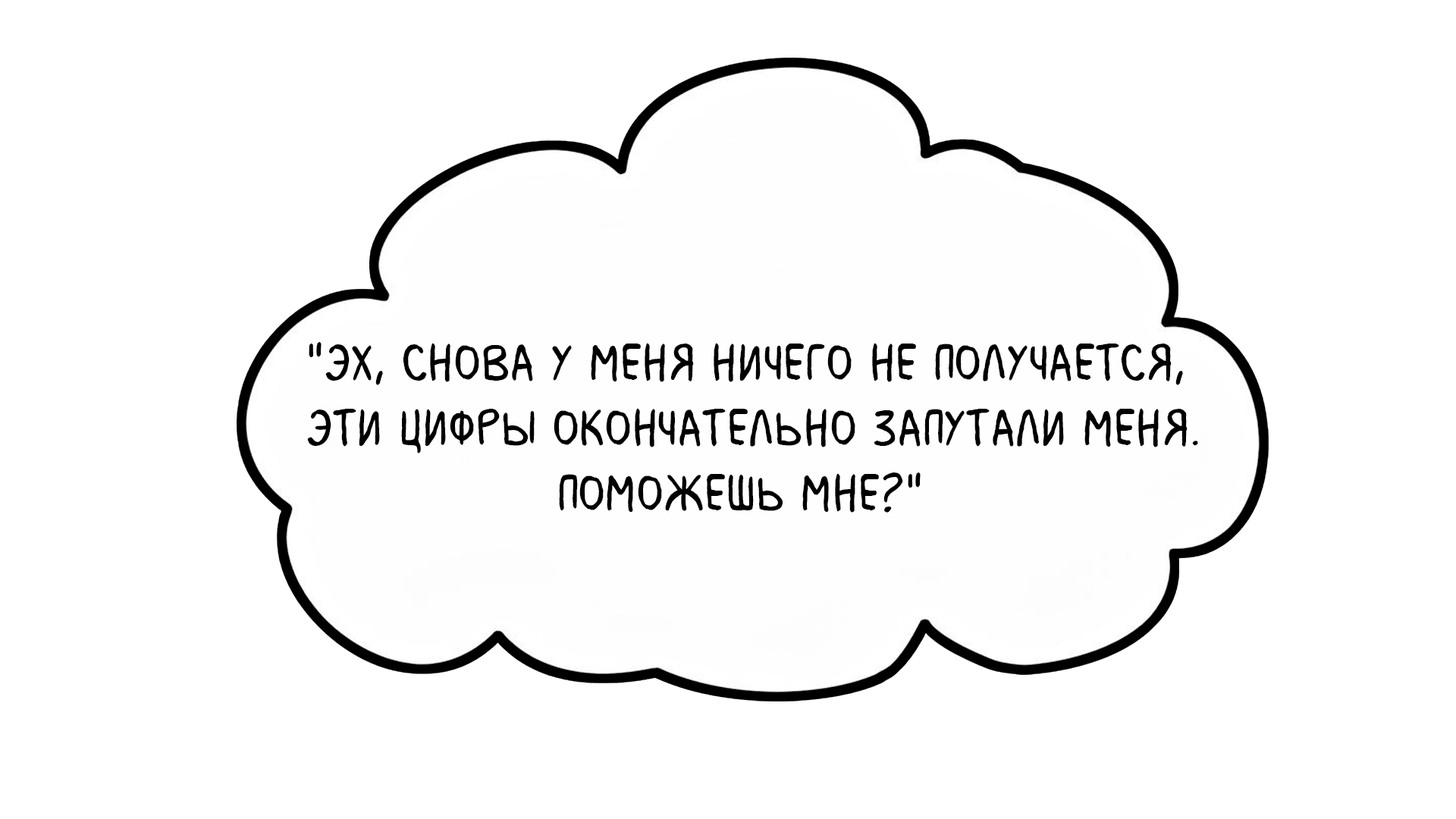
<style>
.page{position:relative;width:1456px;height:819px;background:#ffffff}
.page>*{position:absolute;margin:0}
.t1{font:54.6px "MilkMustacheBB";color:#000000}
</style>
<div class="page">
<p class="t1" style="left:307px;top:342px;width:891px;height:171px">"Эх, снова у меня ничего не получается, <br>эти цифры окончательно запутали меня. <br>                Поможешь мне?"</p>
</div>
